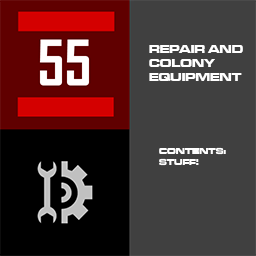
<style>
.page{position:relative;width:256px;height:256px;background:#404040}
.page>*{position:absolute;margin:0}
.t1{font:11.9px "MicrogrammaD-BoldExte";color:#ffffff}
.t2{font:8.9px "MicrogrammaD-BoldExte";color:#ffffff}
</style>
<div class="page">
<p class="t1" style="left:149px;top:45px;width:94px;height:36px">REPAIR AND<br>COLONY<br>EQUIPMENT</p>
<p class="t2" style="left:159px;top:147px;width:67px;height:19px">CONTENTS:<br>STUFF!</p>
</div>
